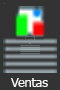
<style>
.page{position:relative;width:60px;height:90px;background:#333333}
.page>*{position:absolute;margin:0}
.t1{font:12.5px "Tahoma";color:#ffffff}
</style>
<div class="page">
<p class="t1" style="left:10px;top:78px;width:38px;height:9px">Ventas</p>
</div>
